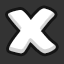
<style>
.page{position:relative;width:64px;height:64px;background:#333333}
.page>*{position:absolute;margin:0}
.t1{font:55.5px "Ourland";color:#ffffff;scale:1.38 1}
</style>
<div class="page">
<p class="t1" style="left:8px;top:8px;width:48px;height:46px">x</p>
</div>
